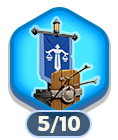
<style>
.page{position:relative;width:118px;height:140px;background:#ffffff}
.page>*{position:absolute;margin:0}
.t1{font:20px "Rowdies-Regular";color:#f8f7ea}
</style>
<div class="page">
<p class="t1" style="left:38px;top:116px;width:42px;height:17px">5/10</p>
</div>
